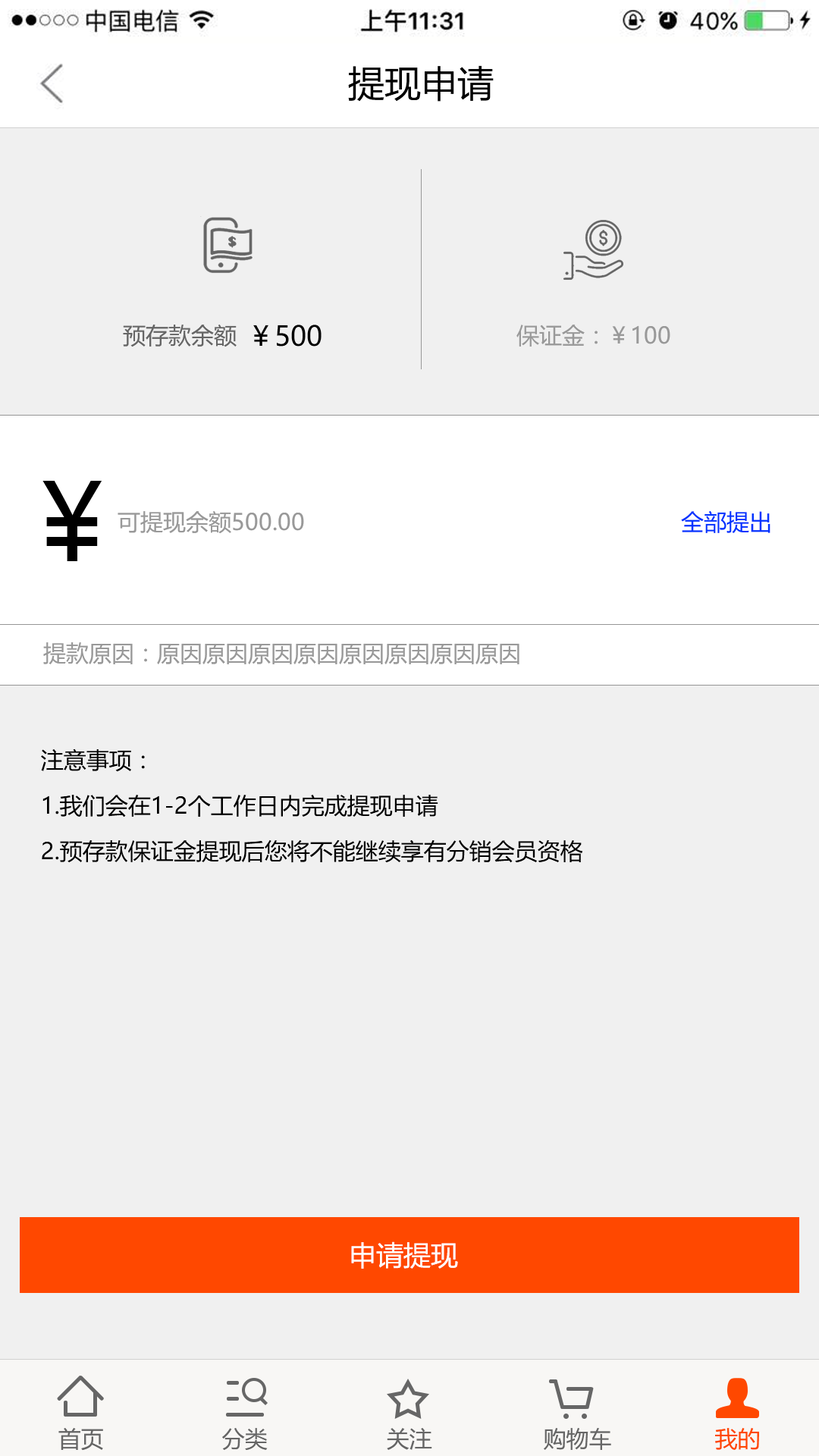
<style>
.page{position:relative;width:819px;height:1456px;background:#f0f0f0}
.page>*{position:absolute;margin:0}
.t1{font:36.4px "MicrosoftYaHei";color:#000000}
.t2{font:22.7px "MicrosoftYaHei";color:#666666}
.t3{font:27.3px "MicrosoftYaHei";color:#000000}
.t4{font:22.7px "MicrosoftYaHei";color:#999999}
.t5{font:106.3px "MicrosoftYaHei";color:#000000}
.t6{font:22.7px "MicrosoftYaHei";color:#0033ff}
.t7{font:22.7px/45.5px "MicrosoftYaHei";color:#000000}
.t8{font:27.3px "MicrosoftYaHei";color:#ffffff}
.t9{font:22.7px "MicrosoftYaHei";color:#ff4800}
</style>
<div class="page">
<p class="t1" style="left:348px;top:65px;width:146px;height:37px">提现申请</p>
<p class="t2" style="left:123px;top:325px;width:114px;height:22px">预存款余额</p>
<p class="t3" style="left:253px;top:325px;width:69px;height:22px">￥500</p>
<p class="t4" style="left:516px;top:325px;width:154px;height:22px">保证金：￥100</p>
<p class="t5" style="left:42px;top:481px;width:60px;height:80px">￥</p>
<p class="t4" style="left:118px;top:511px;width:186px;height:23px">可提现余额500.00</p>
<p class="t6" style="left:681px;top:511px;width:89px;height:22px">全部提出</p>
<p class="t4" style="left:43px;top:642px;width:476px;height:22px">提款原因：原因原因原因原因原因原因原因原因</p>
<p class="t7" style="left:41px;top:748px;width:542px;height:115px">注意事项：<br>1.我们会在1-2个工作日内完成提现申请<br>2.预存款保证金提现后您将不能继续享有分销会员资格</p>
<p class="t8" style="left:351px;top:1241px;width:107px;height:28px">申请提现</p>
<p class="t2" style="left:58px;top:1428px;width:45px;height:23px">首页</p>
<p class="t2" style="left:222px;top:1428px;width:46px;height:23px">分类</p>
<p class="t2" style="left:387px;top:1428px;width:45px;height:22px">关注</p>
<p class="t2" style="left:544px;top:1428px;width:67px;height:22px">购物车</p>
<p class="t9" style="left:715px;top:1428px;width:44px;height:22px">我的</p>
</div>
